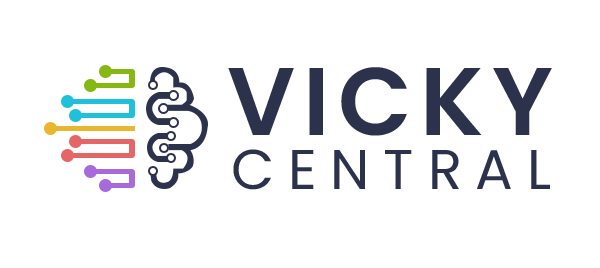
<style>
.page{position:relative;width:600px;height:268px;background:#ffffff}
.page>*{position:absolute;margin:0}
.t1{font:96px "Poppins-SemiBold";letter-spacing:0.085em;color:#2d324c;text-transform:uppercase}
.t2{font:56px "Poppins-Regular";letter-spacing:0.245em;color:#2d324c;text-transform:uppercase}
</style>
<div class="page">
<p class="t1" style="left:228px;top:67px;width:324px;height:69px">Vicky</p>
<p class="t2" style="left:233px;top:149px;width:317px;height:41px">Central</p>
</div>
